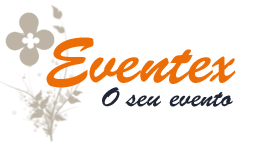
<style>
.page{position:relative;width:256px;height:150px;background:#ffffff}
.page>*{position:absolute;margin:0}
.t1{font:64.7px "BrushScriptStd";color:#ec6c06}
.t2{font:27.4px "BrushScriptStd";color:#212636}
</style>
<div class="page">
<p class="t1" style="left:46px;top:37px;width:190px;height:51px">Eventex</p>
<p class="t2" style="left:102px;top:87px;width:131px;height:20px">O seu evento</p>
</div>
